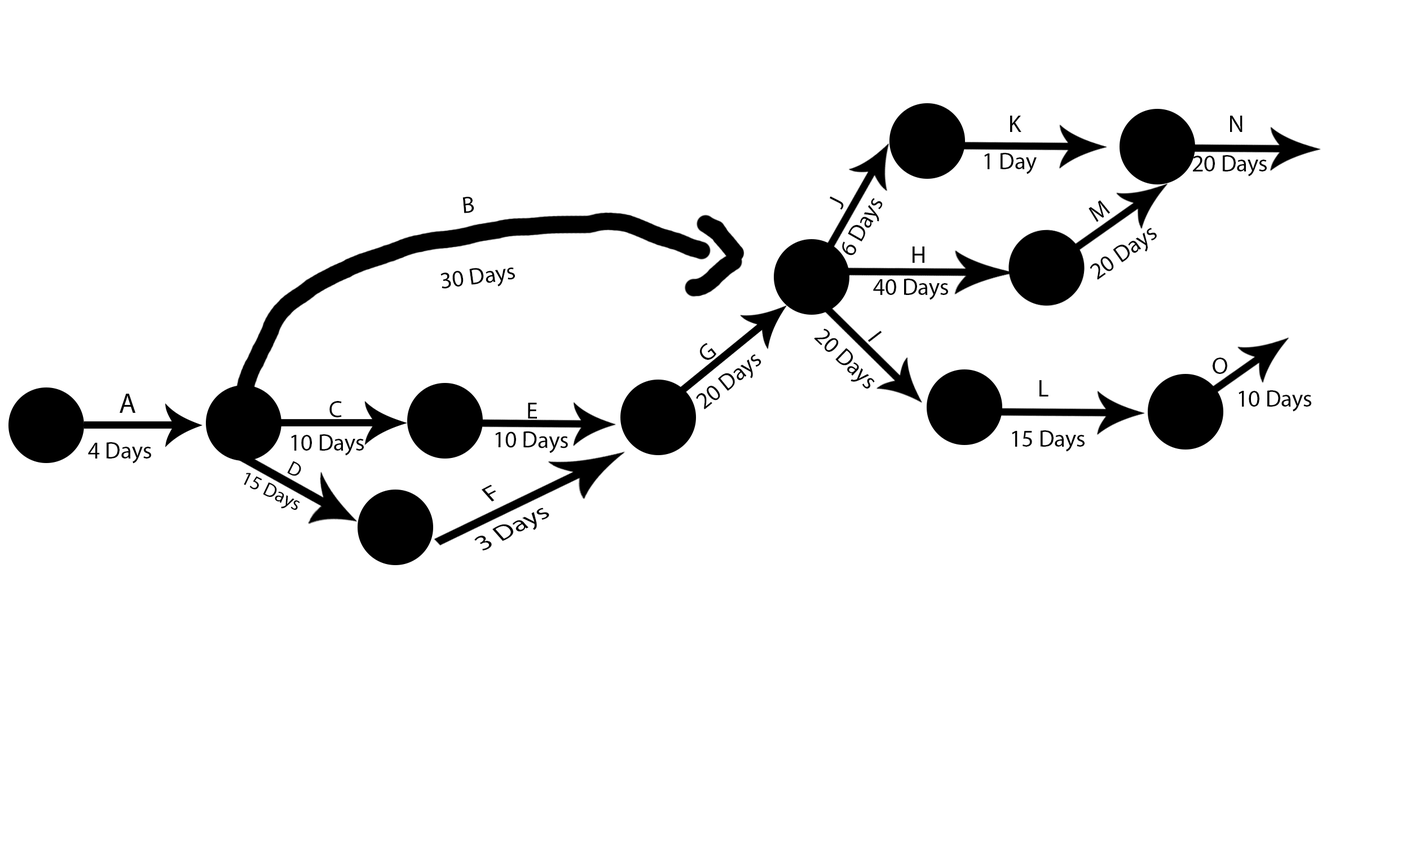
<style>
.page{position:relative;width:1410px;height:846px;background:#ffffff}
.page>*{position:absolute;margin:0}
.t1{font:23.5px "MyriadPro-Regular";color:#000000}
.t2{font:6.8px "MyriadPro-Regular";color:#000000}
.t3{font:19.7px "MyriadPro-Regular";color:#000000}
.t4{font:23.7px "MyriadPro-Regular";color:#000000;scale:1.22 1}
</style>
<div class="page">
<p class="t1" style="left:1010px;top:116px;width:11px;height:16px">K</p>
<p class="t1" style="left:1230px;top:116px;width:12px;height:16px">N</p>
<p class="t1" style="left:984px;top:153px;width:52px;height:21px">1 Day</p>
<p class="t1" style="left:1193px;top:155px;width:74px;height:22px">20 Days</p>
<p class="t1" style="left:462px;top:196px;width:12px;height:17px;rotate:-5deg">B</p>
<p class="t1" style="left:829px;top:196px;width:15px;height:14px;rotate:-63deg">J</p>
<p class="t1" style="left:842px;top:198px;width:41px;height:57px;rotate:-60deg">6 Days</p>
<p class="t1" style="left:1088px;top:200px;width:22px;height:22px;rotate:-36deg">M</p>
<p class="t1" style="left:1089px;top:228px;width:68px;height:52px;rotate:-36deg">20 Days</p>
<p class="t1" style="left:912px;top:246px;width:12px;height:17px">H</p>
<p class="t1" style="left:440px;top:267px;width:75px;height:22px;rotate:-8deg">30 Days</p>
<p class="t1" style="left:873px;top:279px;width:75px;height:21px">40 Days</p>
<p class="t1" style="left:814px;top:328px;width:61px;height:61px;rotate:44deg">20 Days</p>
<p class="t1" style="left:868px;top:330px;width:14px;height:12px;rotate:52deg">I</p>
<p class="t1" style="left:700px;top:343px;width:17px;height:17px;rotate:-39deg">G</p>
<p class="t1" style="left:696px;top:354px;width:65px;height:55px;rotate:-39deg">20 Days</p>
<p class="t1" style="left:1212px;top:358px;width:15px;height:16px">O</p>
<p class="t1" style="left:1039px;top:380px;width:9px;height:16px">L</p>
<p class="t2" style="left:120px;top:394px;width:16px;height:19px">A</p>
<p class="t1" style="left:329px;top:401px;width:13px;height:16px">C</p>
<p class="t1" style="left:1238px;top:390px;width:73px;height:22px">10 Days</p>
<p class="t1" style="left:528px;top:403px;width:9px;height:16px">E</p>
<p class="t1" style="left:291px;top:434px;width:73px;height:22px">10 Days</p>
<p class="t1" style="left:495px;top:431px;width:73px;height:22px">10 Days</p>
<p class="t1" style="left:1012px;top:430px;width:72px;height:22px">15 Days</p>
<p class="t1" style="left:88px;top:442px;width:63px;height:22px">4 Days</p>
<p class="t3" style="left:287px;top:461px;width:14px;height:15px;rotate:28deg">D</p>
<p class="t3" style="left:244px;top:473px;width:56px;height:37px;rotate:27deg">15 Days</p>
<p class="t4" style="left:481px;top:484px;width:15px;height:18px;rotate:-28deg">F</p>
<p class="t4" style="left:474px;top:508px;width:75px;height:42px;rotate:-28deg">3 Days</p>
</div>
